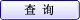
<style>
.page{position:relative;width:80px;height:20px}
.page>*{position:absolute;margin:0}
.t1{font:12px "SimSun";color:#000000}
</style>
<div class="page">
<p class="t1" style="left:24px;top:4px;width:30px;height:12px">查 询</p>
</div>
